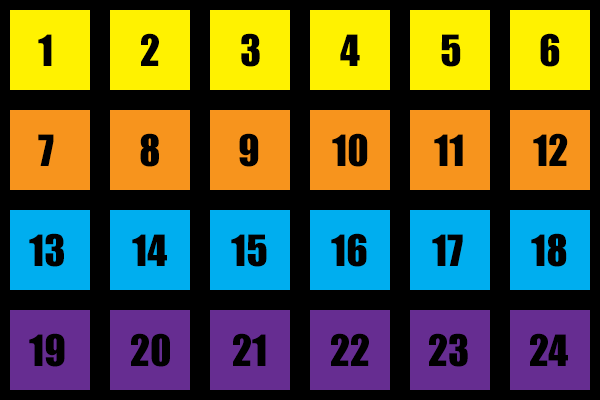
<style>
.page{position:relative;width:600px;height:400px;background:#000000}
.page>*{position:absolute;margin:0}
.t1{font:40px "Impact";color:#000000}
</style>
<div class="page">
<p class="t1" style="left:38px;top:34px;width:14px;height:32px">1</p>
<p class="t1" style="left:141px;top:33px;width:18px;height:33px">2</p>
<p class="t1" style="left:241px;top:33px;width:19px;height:34px">3</p>
<p class="t1" style="left:340px;top:34px;width:20px;height:32px">4</p>
<p class="t1" style="left:441px;top:34px;width:20px;height:33px">5</p>
<p class="t1" style="left:540px;top:33px;width:20px;height:34px">6</p>
<p class="t1" style="left:38px;top:134px;width:16px;height:32px">7</p>
<p class="t1" style="left:140px;top:133px;width:19px;height:34px">8</p>
<p class="t1" style="left:239px;top:133px;width:20px;height:34px">9</p>
<p class="t1" style="left:332px;top:133px;width:36px;height:34px">10</p>
<p class="t1" style="left:434px;top:134px;width:29px;height:32px">11</p>
<p class="t1" style="left:533px;top:133px;width:35px;height:33px">12</p>
<p class="t1" style="left:29px;top:233px;width:35px;height:34px">13</p>
<p class="t1" style="left:331px;top:233px;width:36px;height:34px">16</p>
<p class="t1" style="left:531px;top:233px;width:36px;height:34px">18</p>
<p class="t1" style="left:132px;top:234px;width:35px;height:32px">14</p>
<p class="t1" style="left:231px;top:234px;width:36px;height:33px">15</p>
<p class="t1" style="left:432px;top:234px;width:31px;height:32px">17</p>
<p class="t1" style="left:29px;top:333px;width:36px;height:34px">19</p>
<p class="t1" style="left:131px;top:333px;width:39px;height:34px">20</p>
<p class="t1" style="left:233px;top:333px;width:33px;height:33px">21</p>
<p class="t1" style="left:331px;top:333px;width:38px;height:33px">22</p>
<p class="t1" style="left:429px;top:333px;width:39px;height:34px">23</p>
<p class="t1" style="left:530px;top:333px;width:38px;height:33px">24</p>
</div>
